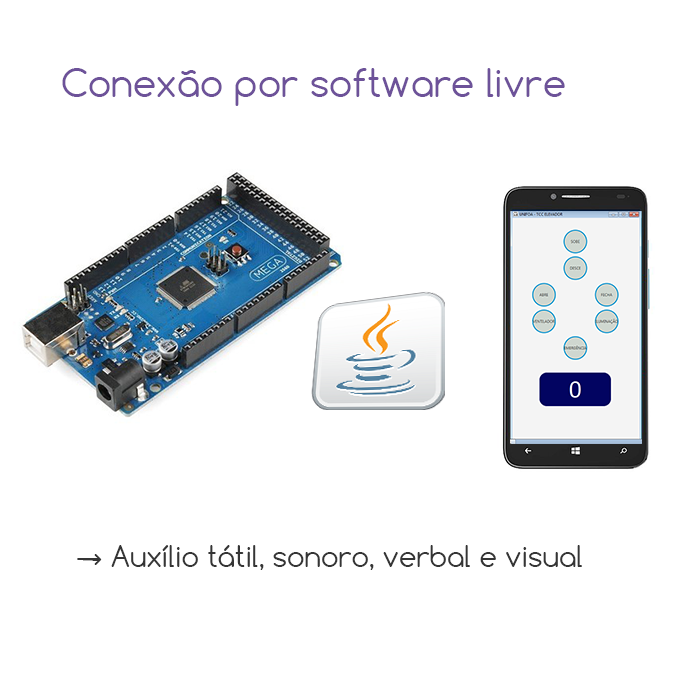
<style>
.page{position:relative;width:700px;height:700px;background:#ffffff}
.page>*{position:absolute;margin:0}
.t1{font:37.3px "Comfortaa";color:#6d5299}
.t2{font:28px "Comfortaa";color:#353535}
</style>
<div class="page">
<p class="t1" style="left:62px;top:68px;width:503px;height:38px">Conexão por software livre</p>
<p class="t2" style="left:77px;top:545px;width:505px;height:25px">→ Auxílio tátil, sonoro, verbal e visual</p>
</div>
